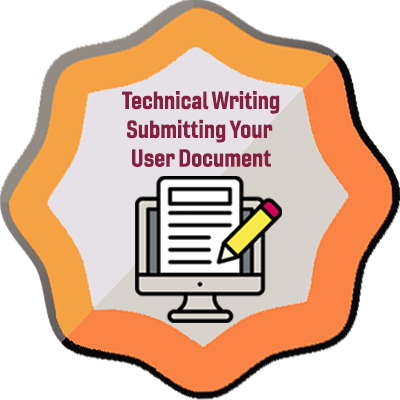
<style>
.page{position:relative;width:400px;height:400px;background:#ffffff}
.page>*{position:absolute;margin:0}
.t1{font:24px "Gineso-ConBol";color:#861f41}
</style>
<div class="page">
<p class="t1" style="left:122px;top:91px;width:158px;height:76px;text-align:center">Technical Writing<br>Submitting Your <br>User Document</p>
</div>
